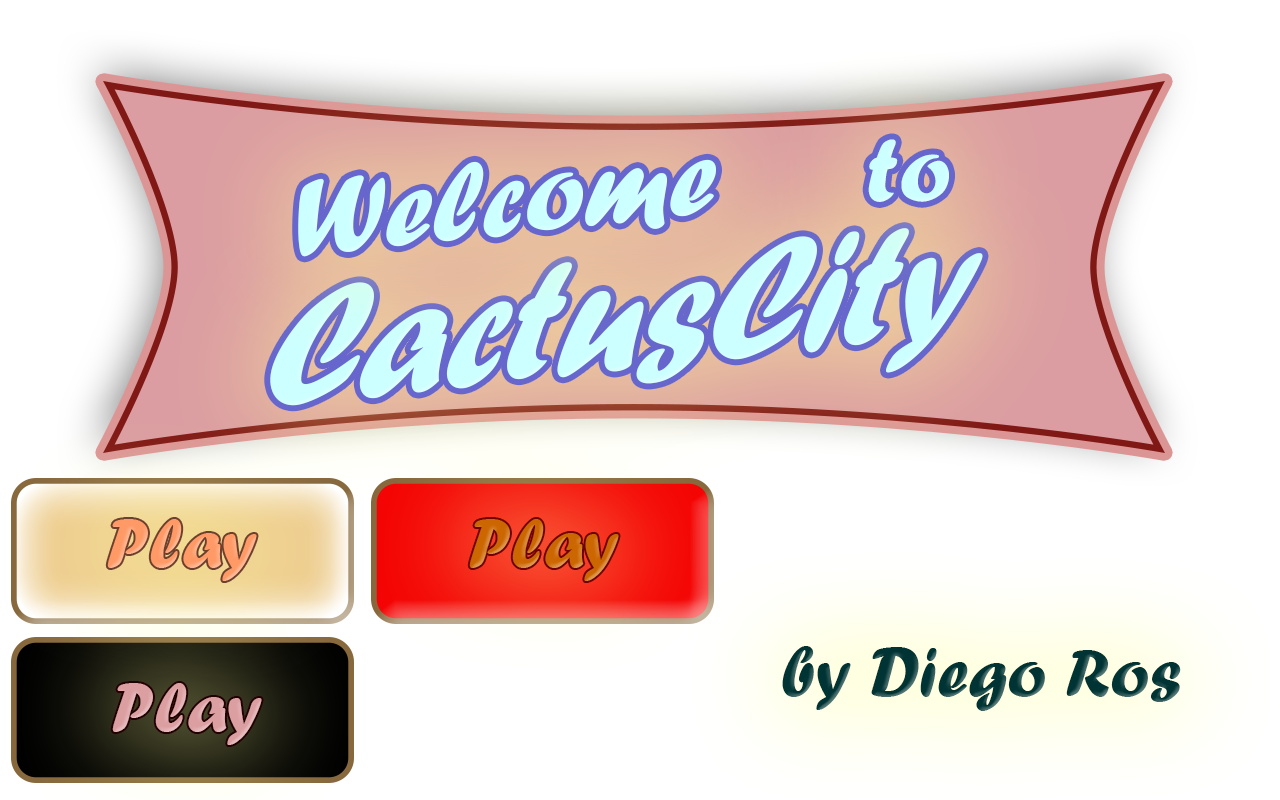
<style>
.page{position:relative;width:1280px;height:800px;background:#ffffff}
.page>*{position:absolute;margin:0}
.t1{font:95.8px "ForteMT";color:#ccffff}
.t2{font:114.3px "ForteMT";color:#ccffff}
.t3{font:180.3px "ForteMT";color:#ccffff;scale:0.86 1}
.t4{font:72px "ForteMT";color:#ff9966}
.t5{font:72px "ForteMT";color:#cc6600}
.t6{font:72px "ForteMT";color:#003333}
.t7{font:72px "ForteMT";color:#db9ea1}
</style>
<div class="page">
<p class="t1" style="left:868px;top:139px;width:81px;height:63px;rotate:-1deg">to</p>
<p class="t2" style="left:298px;top:159px;width:418px;height:98px;rotate:-6deg">Welcome</p>
<p class="t3" style="left:270px;top:228px;width:713px;height:178px;rotate:-6deg">CactusCity</p>
<p class="t4" style="left:107px;top:519px;width:150px;height:62px">Play</p>
<p class="t5" style="left:469px;top:519px;width:150px;height:62px">Play</p>
<p class="t6" style="left:782px;top:646px;width:399px;height:65px">by Diego Ros</p>
<p class="t7" style="left:112px;top:683px;width:150px;height:62px">Play</p>
</div>
